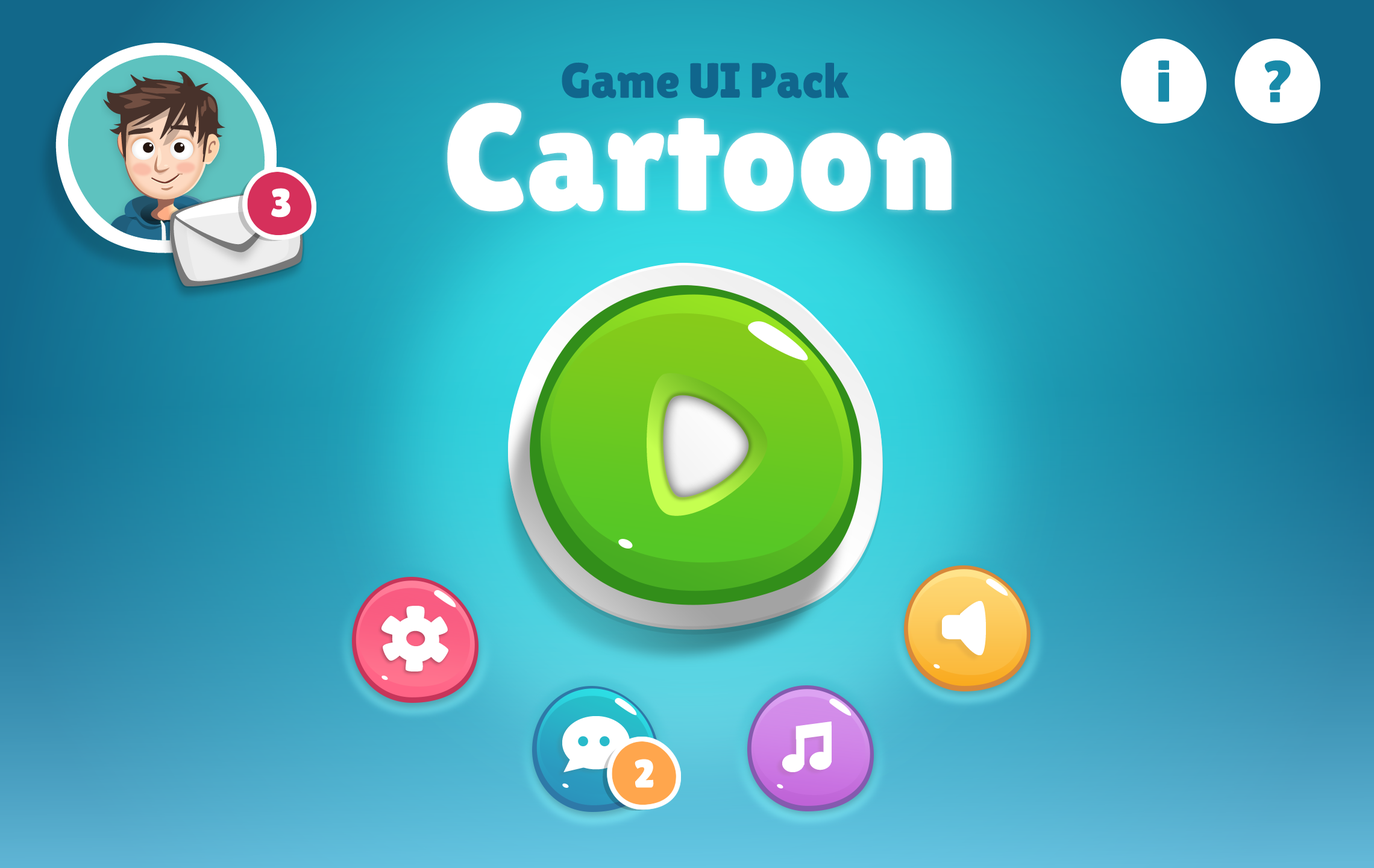
<style>
.page{position:relative;width:1374px;height:868px}
.page>*{position:absolute;margin:0}
.t1{font:49.4px "LilitaOne";color:#10668d}
.t2{font:150.7px "LilitaOne";color:#ffffff}
</style>
<div class="page">
<p class="t1" style="left:562px;top:62px;width:287px;height:36px">Game UI Pack</p>
<p class="t2" style="left:447px;top:102px;width:505px;height:110px">Cartoon</p>
</div>
